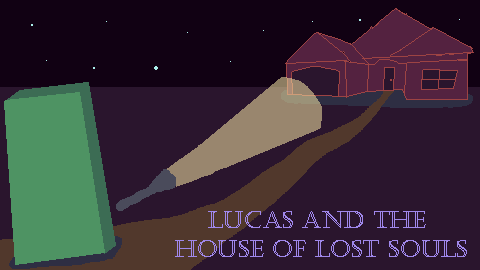
<style>
.page{position:relative;width:480px;height:270px;background:#2a152d}
.page>*{position:absolute;margin:0}
.t1{font:24px "Castellar";color:#a088ec}
</style>
<div class="page">
<p class="t1" style="left:175px;top:211px;width:292px;height:46px;text-align:center">Lucas and the <br>House of Lost Souls</p>
</div>
